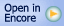
<style>
.page{position:relative;width:64px;height:26px}
.page>*{position:absolute;margin:0}
.t1{font:10.5px/10px "Tahoma";color:#00164a}
</style>
<div class="page">
<p class="t1" style="left:4px;top:3px;width:36px;height:19px">Open in<br>Encore</p>
</div>
